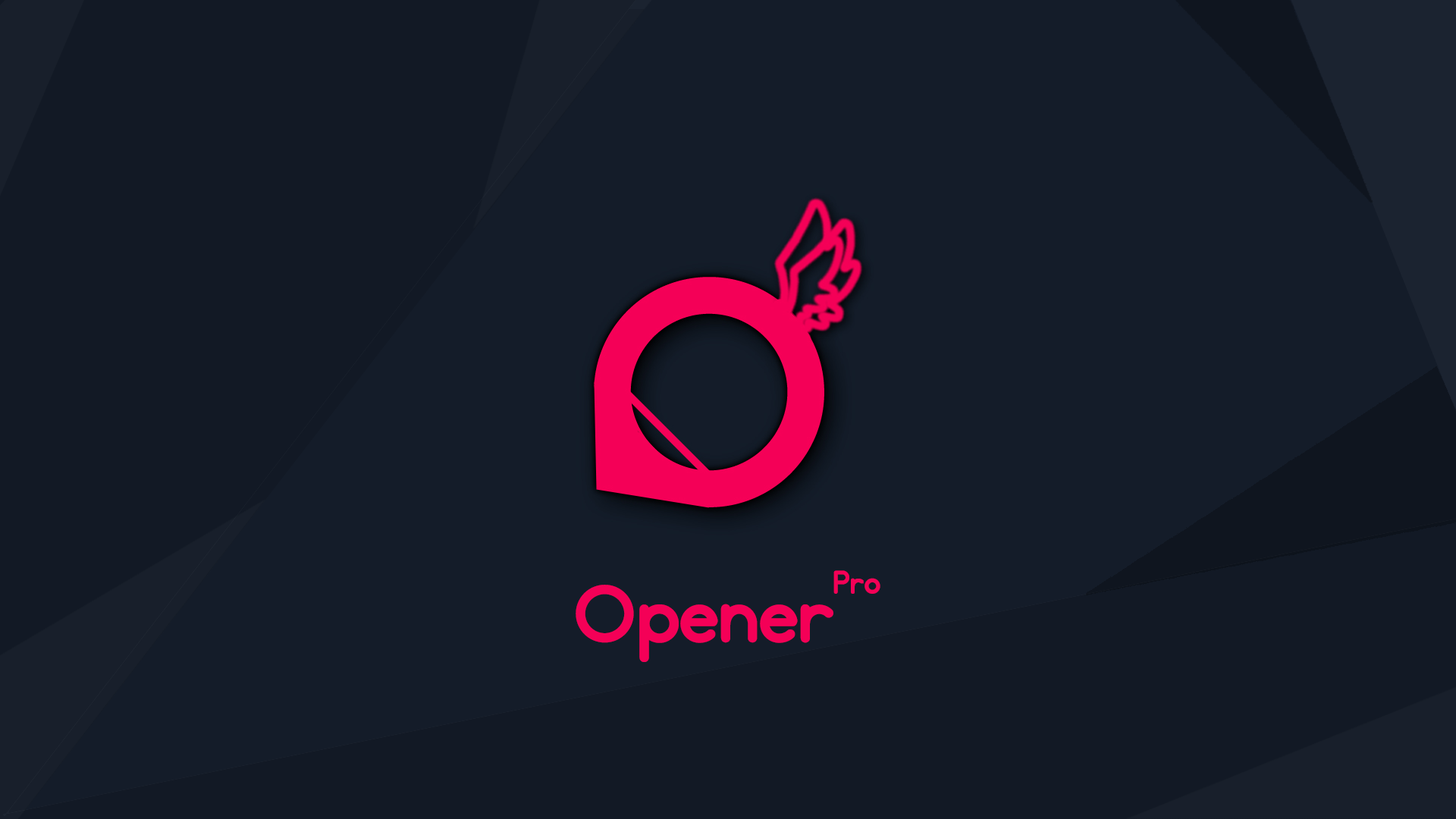
<style>
.page{position:relative;width:1456px;height:819px;background:#141c29}
.page>*{position:absolute;margin:0}
.t1{font:30.3px "Somatic-Rounded";letter-spacing:-0.01em;color:#f40057}
.t2{font:75.9px "Somatic-Rounded";letter-spacing:-0.01em;color:#f40057}
</style>
<div class="page">
<p class="t1" style="left:833px;top:570px;width:47px;height:24px">Pro</p>
<p class="t2" style="left:576px;top:585px;width:257px;height:77px">Opener</p>
</div>
